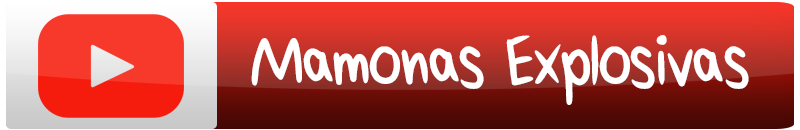
<style>
.page{position:relative;width:800px;height:130px}
.page>*{position:absolute;margin:0}
.t1{font:78px "Brendohand-Regular";color:#ffffff}
</style>
<div class="page">
<p class="t1" style="left:251px;top:35px;width:498px;height:70px">Mamonas Explosivas</p>
</div>
